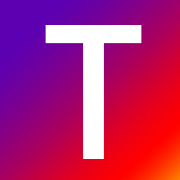
<style>
.page{position:relative;width:180px;height:180px}
.page>*{position:absolute;margin:0}
.t1{font:185px "JetBrainsMono-Medium";color:#ffffff}
</style>
<div class="page">
<p class="t1" style="left:45px;top:25px;width:97px;height:134px">T</p>
</div>
